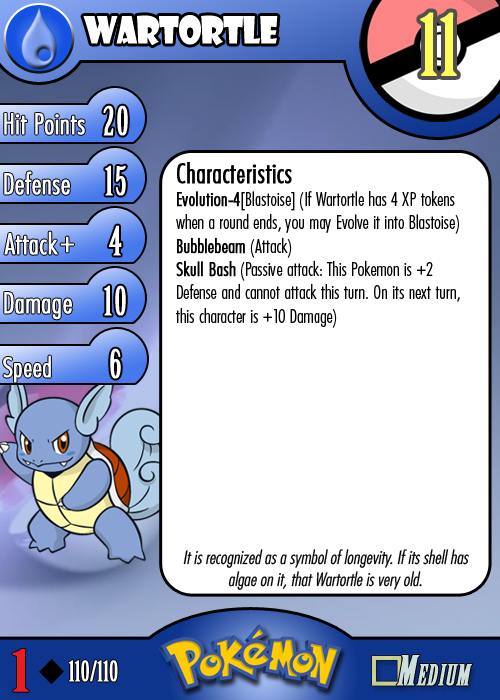
<style>
.page{position:relative;width:500px;height:700px;background:#ffffff}
.page>*{position:absolute;margin:0}
.t1{font:36.7px "ShowcardGothic-Reg";letter-spacing:-0.025em;color:#ffffff;scale:0.91 1}
.t2{font:83.3px "BirchStd";letter-spacing:0.025em;color:#fffd59;font-weight:bold}
.t3{font:27.8px "Futura-CondensedLight";color:#ffffff;font-weight:bold}
.t4{font:38.9px "BirchStd";letter-spacing:0.035em;color:#ffffff;font-weight:bold}
.t5{font:19.4px "FuturaCondensedBQ-Light";color:#010101}
.t6{font:27.8px "FuturaCondensedBQ-Light";color:#010101;font-weight:bold}
.t7{font:19.4px "FuturaCondensedBQ-Light";color:#010101;font-weight:bold}
.t8{font:30.6px "Futura-CondensedLight";color:#ffffff;font-weight:bold}
.t9{font:27.8px "FuturaCondensedBQ-Light";color:#ffffff;font-weight:bold}
.t10{font:18.1px "Futura-CondensedLight";color:#010101;font-style:italic}
.t11{font:55.6px "BirchStd";color:#ed1c24;font-weight:bold;scale:1.5 1}
.t12{font:27.8px "BirchStd";color:#ffffff;font-weight:bold}
</style>
<div class="page">
<p class="t1" style="left:83px;top:15px;width:195px;height:31px">Wartortle</p>
<p class="t2" style="left:420px;top:12px;width:37px;height:64px">11</p>
<p class="t3" style="left:4px;top:113px;width:81px;height:22px">Hit Points</p>
<p class="t4" style="left:103px;top:105px;width:25px;height:31px">20</p>
<p class="t3" style="left:4px;top:171px;width:66px;height:24px">Defense</p>
<p class="t4" style="left:105px;top:165px;width:21px;height:31px">15</p>
<p class="t5" style="left:176px;top:162px;width:284px;height:166px"><span class="t6">Characteristics<br></span><span class="t7">Evolution-4</span>[Blastoise] (If Wartortle has 4 XP tokens when a round ends, you may Evolve it into Blastoise)<br><span class="t7">Bubblebeam</span> (Attack)<br><span class="t7">Skull Bash</span> (Passive attack: This Pokemon is +2 Defense and cannot attack this turn. On its next turn, this character is +10 Damage)</p>
<p class="t3" style="left:4px;top:231px;width:54px;height:24px">Attack</p>
<p class="t4" style="left:109px;top:225px;width:13px;height:31px">4</p>
<p class="t8" style="left:60px;top:236px;width:14px;height:17px">+</p>
<p class="t3" style="left:4px;top:292px;width:68px;height:28px">Damage</p>
<p class="t4" style="left:104px;top:285px;width:22px;height:31px">10</p>
<p class="t4" style="left:110px;top:348px;width:11px;height:31px">6</p>
<p class="t9" style="left:3px;top:355px;width:48px;height:28px">Speed</p>
<p class="t10" style="left:183px;top:549px;width:286px;height:41px;text-align:center">It is recognized as a symbol of longevity. If its shell has algae on it, that Wartortle is very old.</p>
<p class="t11" style="left:12px;top:649px;width:17px;height:43px">1</p>
<p class="t12" style="left:68px;top:660px;width:50px;height:22px">110/110</p>
</div>
